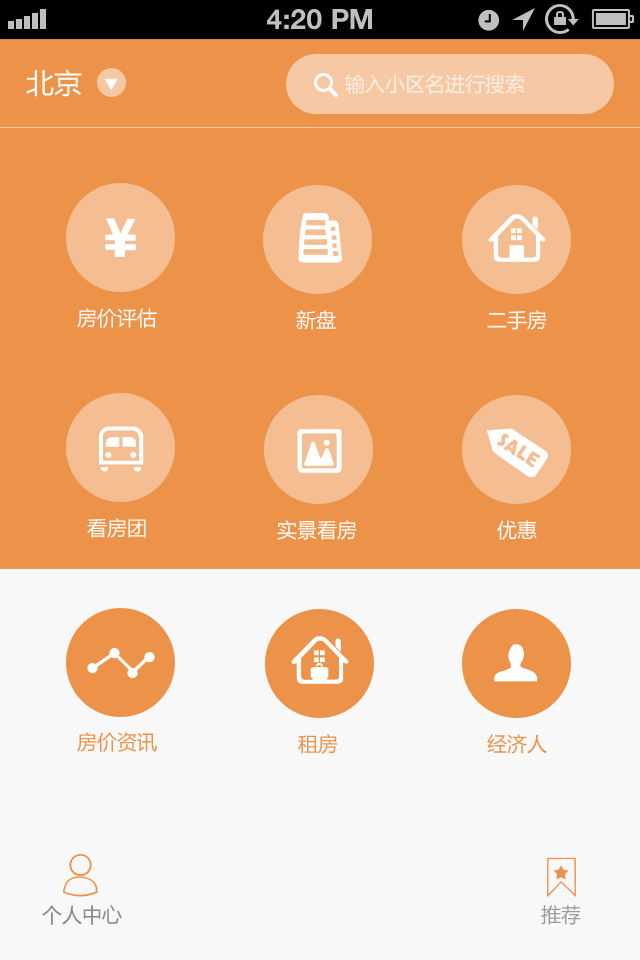
<style>
.page{position:relative;width:640px;height:960px;background:#ed9249}
.page>*{position:absolute;margin:0}
.t1{font:28px "HelveticaNeue-Bold";color:#bfbfbf;text-transform:uppercase}
.t2{font:28px "MicrosoftYaHei";color:#ffffff}
.t3{font:20px "MicrosoftYaHei";color:#fcf0e6}
.t4{font:20px "MicrosoftYaHei";color:#ffffff}
.t5{font:20px "MicrosoftYaHei";color:#ed9249}
.t6{font:20px "MicrosoftYaHei";color:#878787}
.t7{font:20px "MicrosoftYaHei";color:#9c9c9c}
</style>
<div class="page">
<p class="t1" style="left:267px;top:9px;width:105px;height:21px">4:20 PM</p>
<p class="t2" style="left:26px;top:69px;width:56px;height:28px">北京</p>
<p class="t3" style="left:345px;top:74px;width:180px;height:20px">输入小区名进行搜索</p>
<p class="t4" style="left:77px;top:308px;width:80px;height:20px">房价评估</p>
<p class="t4" style="left:296px;top:310px;width:40px;height:20px">新盘</p>
<p class="t4" style="left:487px;top:310px;width:60px;height:20px">二手房</p>
<p class="t4" style="left:87px;top:518px;width:59px;height:20px">看房团</p>
<p class="t4" style="left:277px;top:520px;width:80px;height:20px">实景看房</p>
<p class="t4" style="left:497px;top:520px;width:40px;height:20px">优惠</p>
<p class="t5" style="left:77px;top:732px;width:80px;height:20px">房价资讯</p>
<p class="t5" style="left:298px;top:734px;width:40px;height:20px">租房</p>
<p class="t5" style="left:487px;top:734px;width:60px;height:20px">经济人</p>
<p class="t6" style="left:42px;top:905px;width:80px;height:20px">个人中心</p>
<p class="t7" style="left:541px;top:905px;width:40px;height:20px">推荐</p>
</div>
